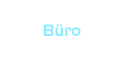
<style>
.page{position:relative;width:123px;height:60px;background:#ffffff}
.page>*{position:absolute;margin:0}
.t1{font:16px "AeroRegularSWFTE";color:#8bedff}
</style>
<div class="page">
<p class="t1" style="left:43px;top:24px;width:38px;height:12px">Büro</p>
</div>
